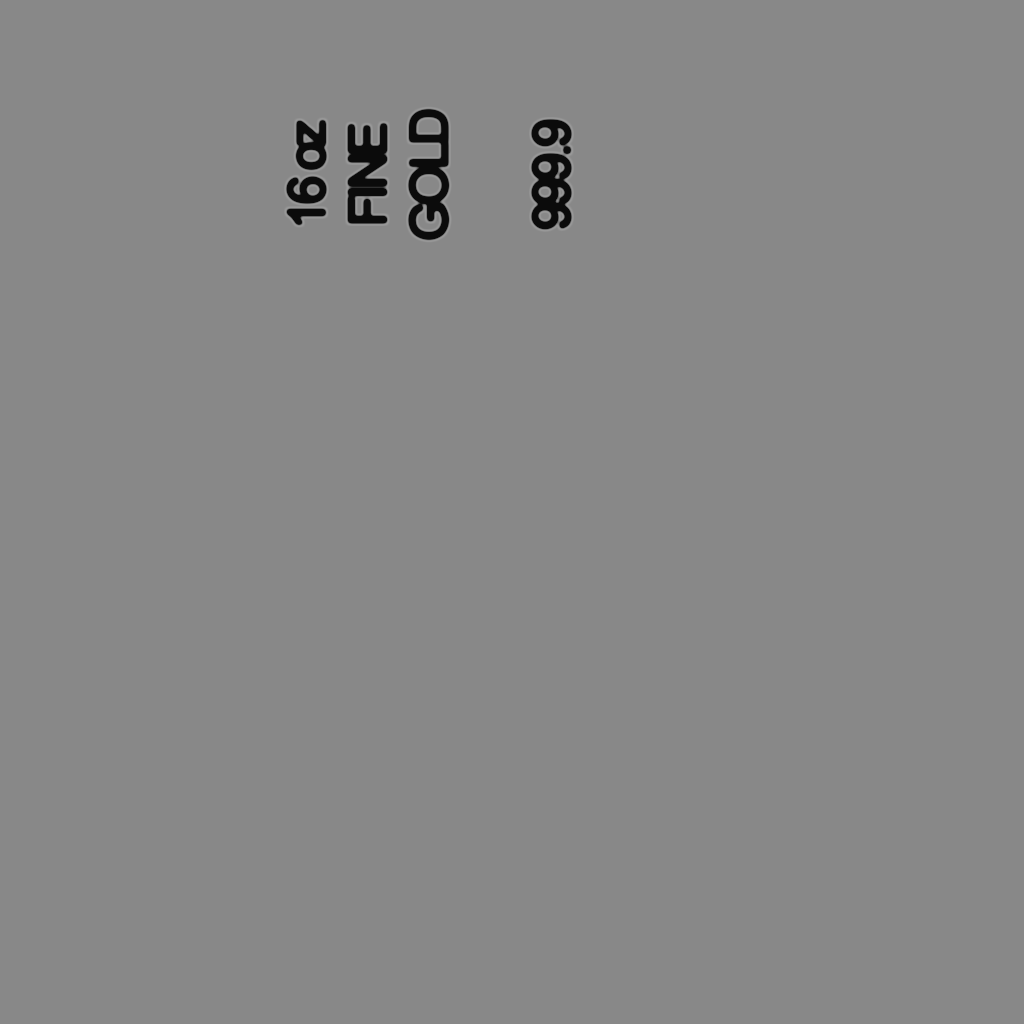
<style>
.page{position:relative;width:1024px;height:1024px;background:#888888}
.page>*{position:absolute;margin:0}
.t1{font:51px "ArialMT";letter-spacing:-0.08em;color:#000000}
</style>
<div class="page">
<p class="t1" style="left:288px;top:110px;width:282px;height:129px;text-align:center;rotate:-90deg">16 oz<br>FINE<br>GOLD<br><br>999.9</p>
</div>
